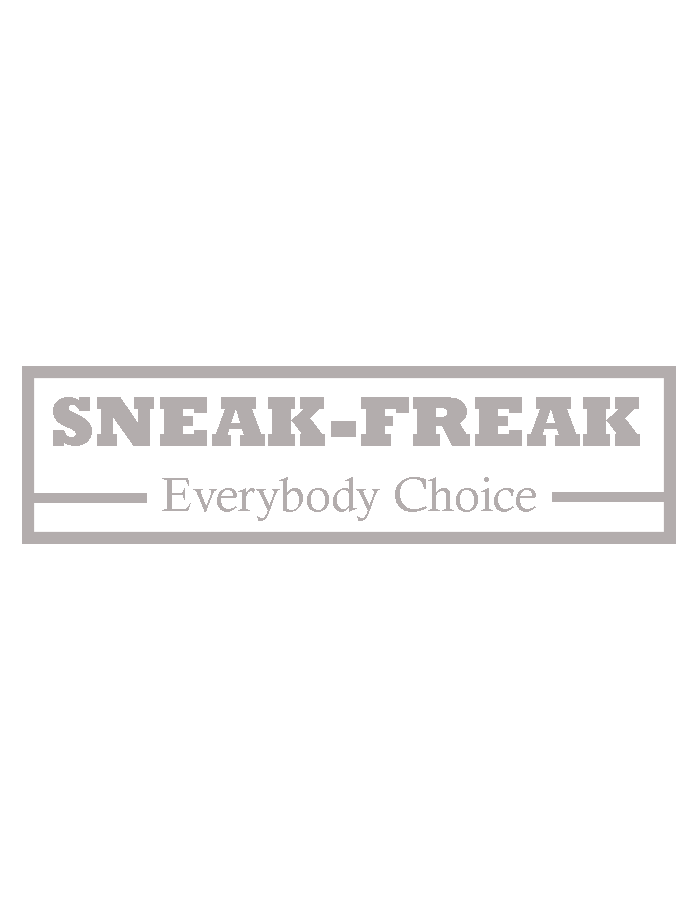
<style>
.page{position:relative;width:698px;height:910px;background:#ffffff}
.page>*{position:absolute;margin:0}
.t1{font:72px "Rockwell-ExtraBold";color:#b3adad}
.t2{font:48px "CalistoMT";color:#b3adad}
</style>
<div class="page">
<p class="t1" style="left:53px;top:397px;width:587px;height:49px">SNEAK-FREAK</p>
<p class="t2" style="left:162px;top:477px;width:374px;height:44px">Everybody Choice</p>
</div>
